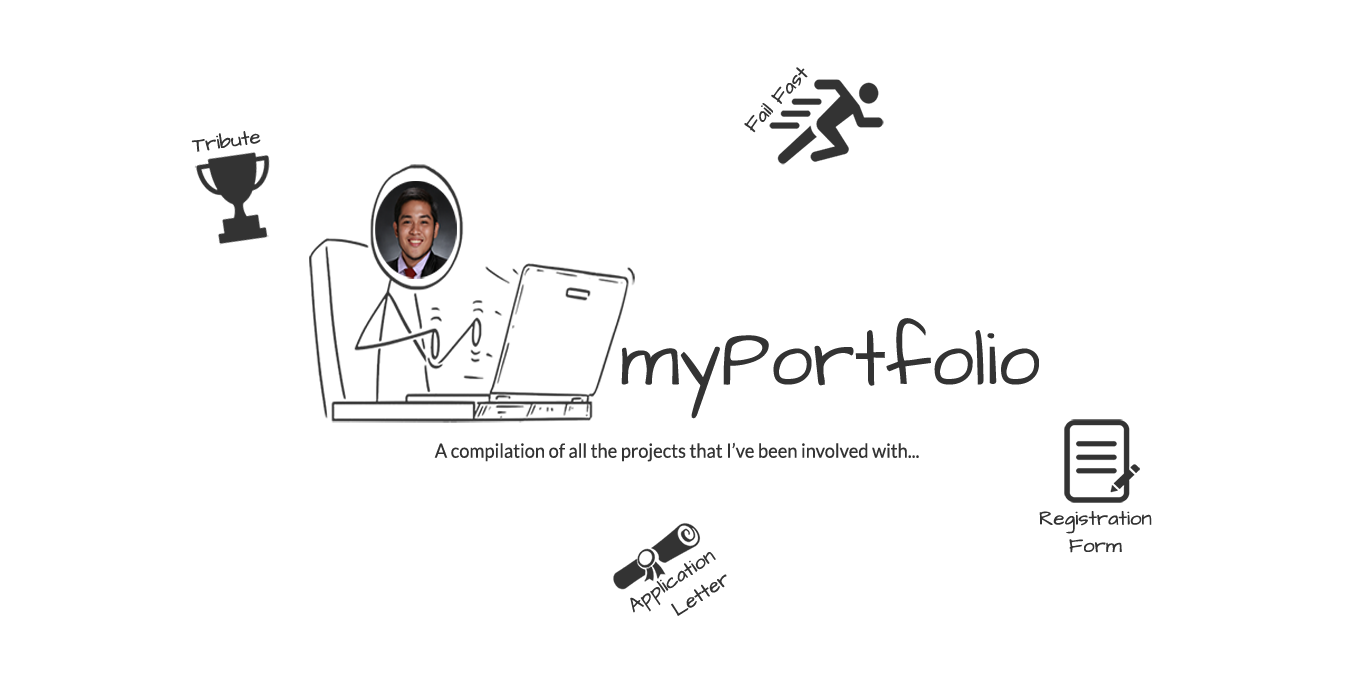
<style>
.page{position:relative;width:1366px;height:700px;background:#ffffff}
.page>*{position:absolute;margin:0}
.t1{font:20.6px "ArchitectsDaughter-Regular";color:#333333}
.t2{font:20.5px "ArchitectsDaughter-Regular";color:#333333}
.t3{font:81.6px "ArchitectsDaughter-Regular";color:#333333;scale:0.93 1}
.t4{font:19.6px "Lato-Regular";color:#333333;scale:0.93 1}
.t5{font:20.5px/27.3px "ArchitectsDaughter-Regular";color:#333333}
</style>
<div class="page">
<p class="t1" style="left:744px;top:67px;width:64px;height:66px;rotate:-46deg">Fail Fast</p>
<p class="t2" style="left:191px;top:131px;width:70px;height:21px;rotate:-8deg">Tribute</p>
<p class="t3" style="left:621px;top:318px;width:418px;height:101px">myPortfolio</p>
<p class="t4" style="left:434px;top:442px;width:485px;height:20px">A compilation of all the projects that I’ve been involved with...</p>
<p class="t5" style="left:1039px;top:511px;width:113px;height:42px;text-align:center">Registration<br>Form</p>
<p class="t5" style="left:630px;top:552px;width:97px;height:64px;text-align:right;rotate:-33deg">Application<br>Letter</p>
</div>
